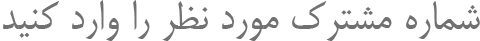
<style>
.page{position:relative;width:480px;height:41px;background:#ffffff}
.page>*{position:absolute;margin:0}
.t1{font:48px "BMitra";color:#717171}
</style>
<div class="page">
<p class="t1" style="left:3px;top:0px;width:477px;height:41px">شماره مشترک مورد نظر را وارد کنید</p>
</div>
